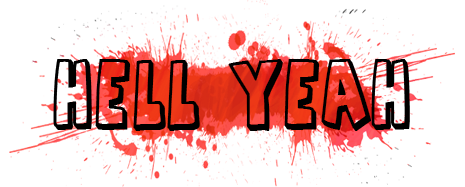
<style>
.page{position:relative;width:465px;height:187px;background:#ffffff}
.page>*{position:absolute;margin:0}
.t1{font:63.5px "AgentOrange";letter-spacing:0.04em;color:#000000;font-weight:bold;scale:0.75 1}
</style>
<div class="page">
<p class="t1" style="left:53px;top:59px;width:357px;height:72px">Hell yeah</p>
</div>
